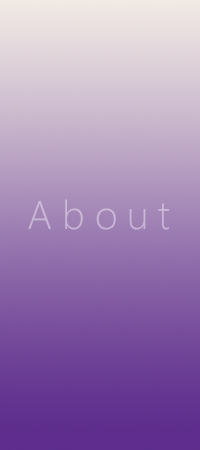
<style>
.page{position:relative;width:200px;height:450px}
.page>*{position:absolute;margin:0}
.t1{font:40px "SegoeUI-Light";letter-spacing:0.25em;color:#cab7d7}
</style>
<div class="page">
<p class="t1" style="left:28px;top:199px;width:141px;height:31px">About</p>
</div>
